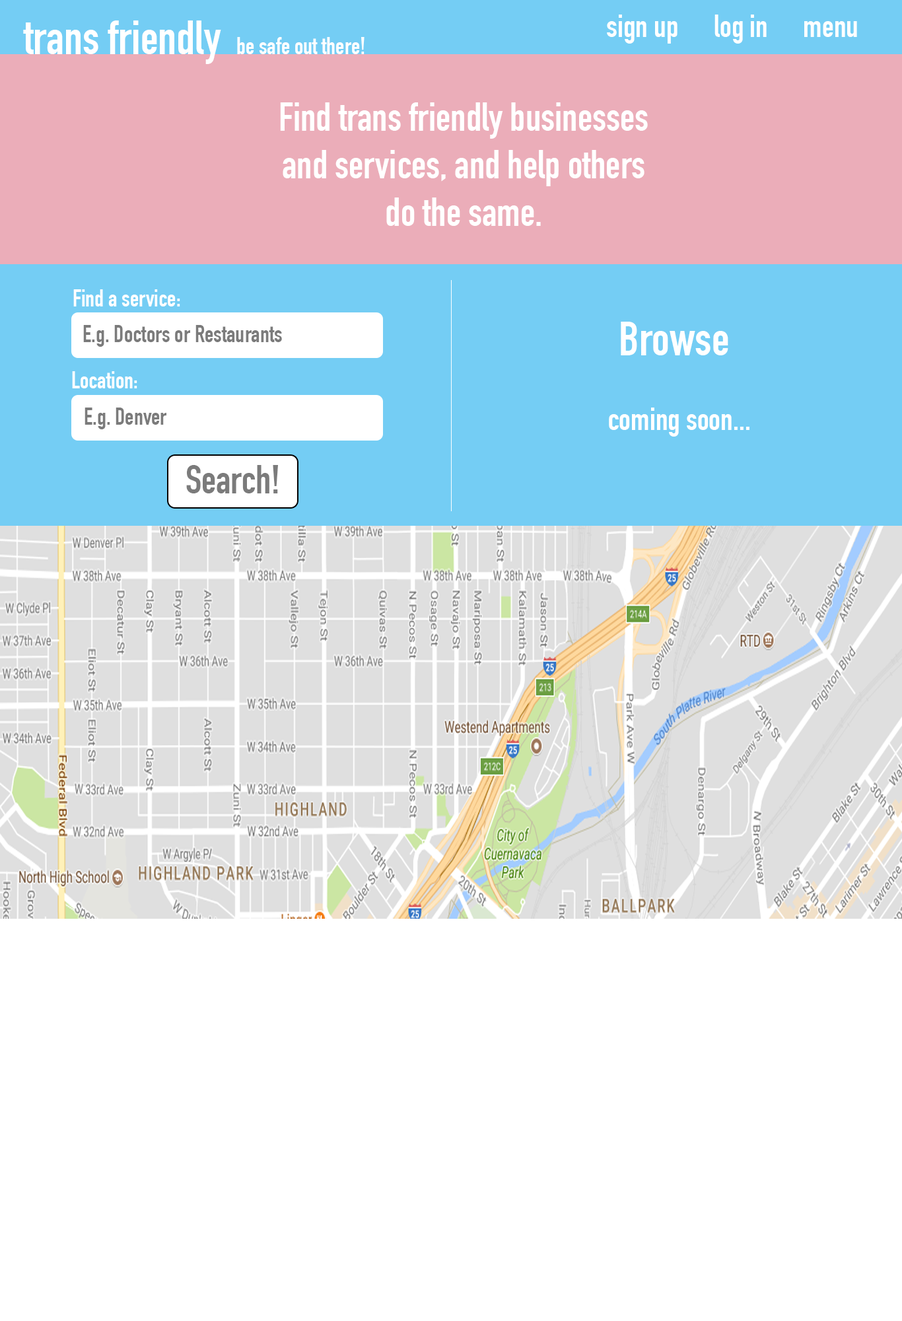
<style>
.page{position:relative;width:902px;height:1321px;background:#ffffff}
.page>*{position:absolute;margin:0}
.t1{font:47.6px "DINCondensed-Bold";color:#ffffff}
.t2{font:23.8px "DINCondensed-Bold";color:#ffffff}
.t3{font:39.6px "DINCondensed-Bold";color:#ffffff}
.t4{font:23.8px "DINCondensed-Bold";color:#7b7b7b}
.t5{font:31.7px "DINCondensed-Bold";color:#ffffff}
.t6{font:39.6px "DINCondensed-Bold";color:#7b7b7b}
</style>
<div class="page">
<p class="t1" style="left:23px;top:20px;width:198px;height:44px">trans friendly</p>
<p class="t2" style="left:237px;top:37px;width:128px;height:17px">be safe out there!</p>
<p class="t3" style="left:280px;top:102px;width:368px;height:124px;text-align:center">Find trans friendly businesses and services, and help others do the same.</p>
<p class="t2" style="left:73px;top:289px;width:107px;height:18px">Find a service:</p>
<p class="t4" style="left:83px;top:325px;width:199px;height:22px">E.g. Doctors or Restaurants</p>
<p class="t1" style="left:621px;top:322px;width:108px;height:33px">Browse</p>
<p class="t2" style="left:72px;top:371px;width:65px;height:17px">Location:</p>
<p class="t4" style="left:85px;top:408px;width:81px;height:21px">E.g. Denver</p>
<p class="t5" style="left:609px;top:408px;width:141px;height:29px">coming soon...</p>
<p class="t6" style="left:186px;top:465px;width:92px;height:29px">Search!</p>
</div>
